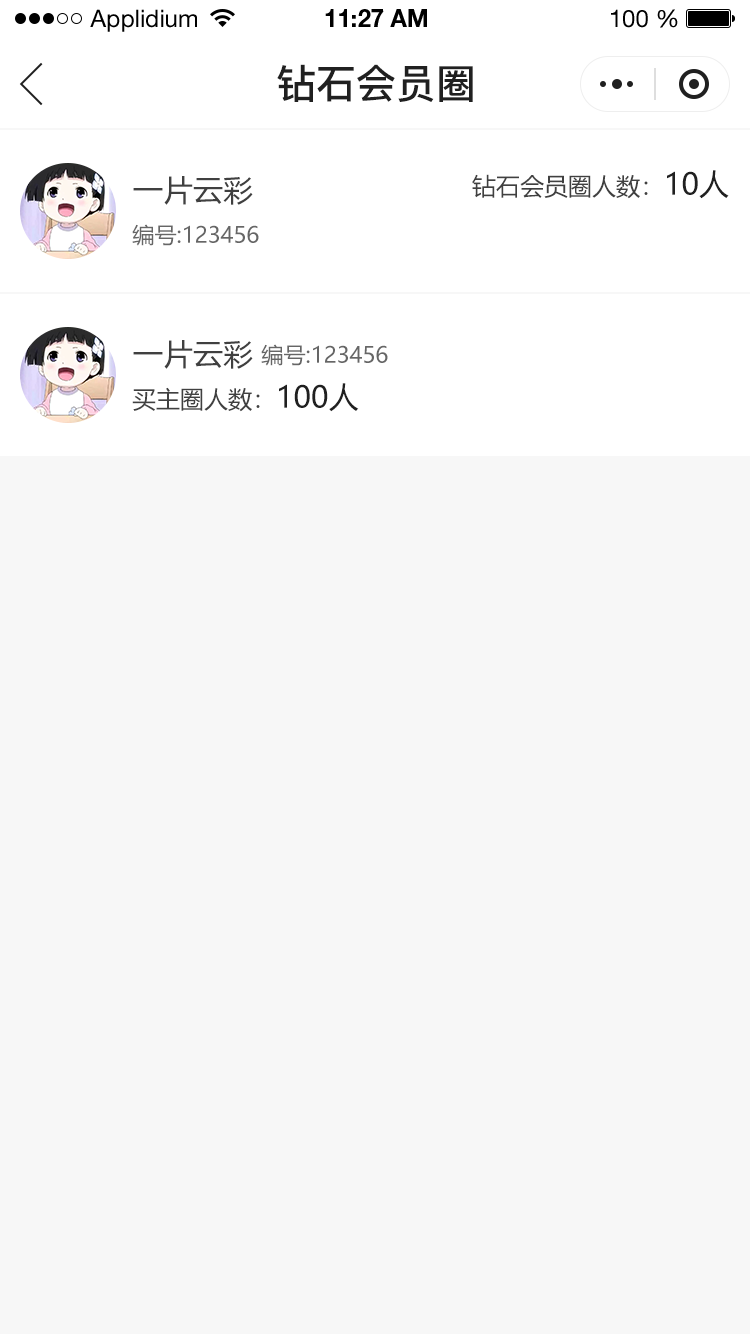
<style>
.page{position:relative;width:750px;height:1334px;background:#f7f7f7}
.page>*{position:absolute;margin:0}
.t1{font:24px "HelveticaNeueLTStd-Roman";color:#000000}
.t2{font:24px "HelveticaNeueLTStd-Bd";color:#000000}
.t3{font:40px "PingFang-SC-Bold";color:#202020;text-transform:uppercase}
.t4{font:24px "MicrosoftYaHei";color:#404040;text-transform:uppercase}
.t5{font:30px "MicrosoftYaHei";color:#202020;text-transform:uppercase}
.t6{font:30px "MicrosoftYaHei";color:#404040;text-transform:uppercase}
.t7{font:22px "MicrosoftYaHei";color:#666666;text-transform:uppercase}
</style>
<div class="page">
<p class="t1" style="left:90px;top:9px;width:107px;height:23px">Applidium</p>
<p class="t2" style="left:325px;top:9px;width:102px;height:18px">11:27 AM</p>
<p class="t1" style="left:611px;top:9px;width:67px;height:19px">100 %</p>
<p class="t3" style="left:277px;top:64px;width:196px;height:38px">钻石会员圈</p>
<p class="t4" style="left:472px;top:170px;width:257px;height:29px">钻石会员圈人数：<span class="t5">10人</span></p>
<p class="t6" style="left:133px;top:176px;width:120px;height:29px">一片云彩</p>
<p class="t7" style="left:132px;top:224px;width:127px;height:22px">编号:123456</p>
<p class="t6" style="left:133px;top:340px;width:120px;height:29px">一片云彩</p>
<p class="t7" style="left:261px;top:344px;width:127px;height:22px">编号:123456</p>
<p class="t4" style="left:132px;top:383px;width:227px;height:29px">买主圈人数：<span class="t5">100人</span></p>
</div>
